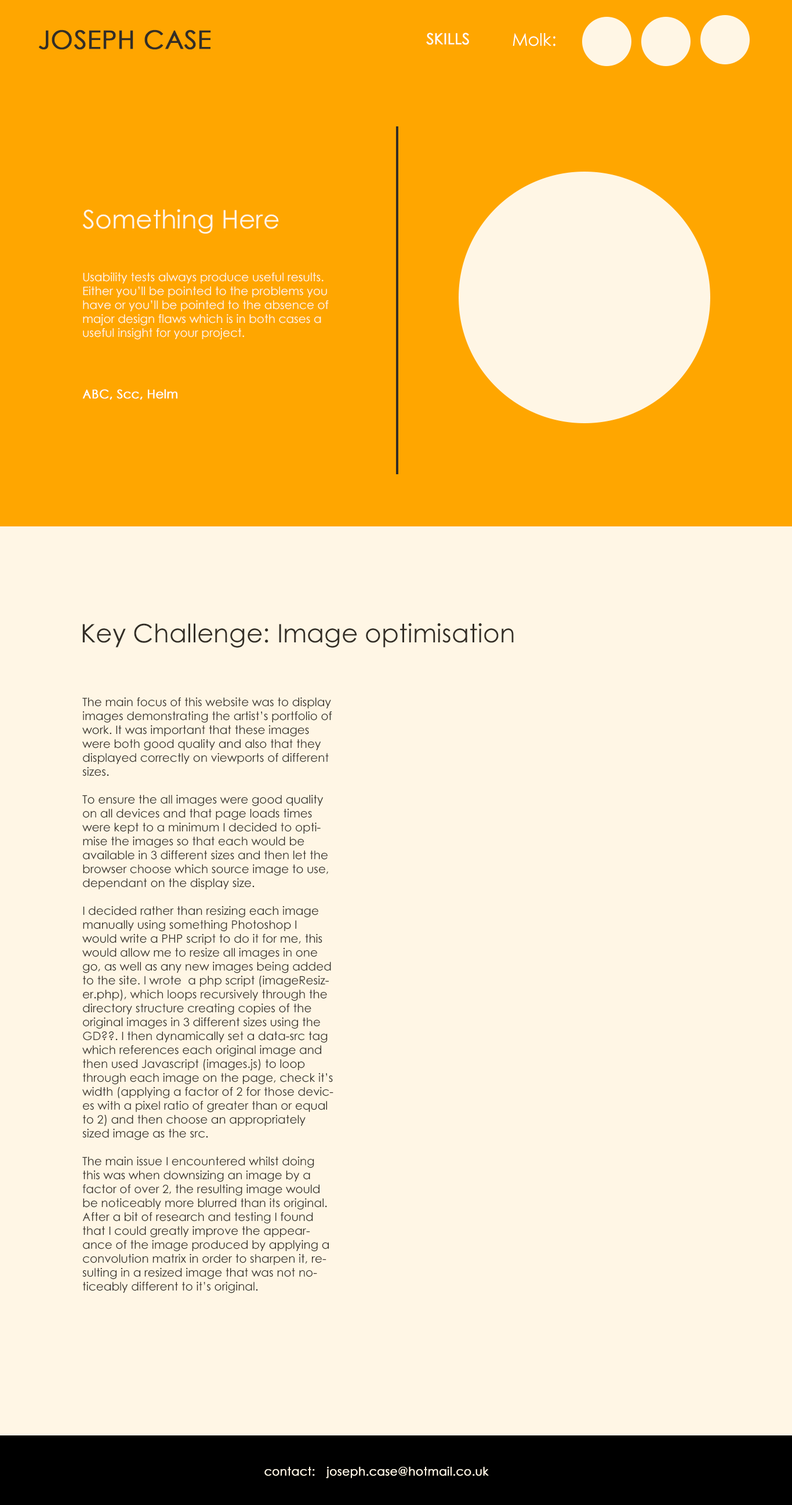
<style>
.page{position:relative;width:792px;height:1505px;background:#fff6e5}
.page>*{position:absolute;margin:0}
.t1{font:25.5px "CenturyGothic";color:#332e26;font-weight:bold}
.t2{font:15.1px "CenturyGothic";color:#ffffff;font-weight:bold}
.t3{font:17.4px "CenturyGothic";color:#ffffff}
.t4{font:25.5px "CenturyGothic";color:#fff6e5}
.t5{font:11.6px "CenturyGothic";color:#fff6e5}
.t6{font:12.2px "CenturyGothic";color:#ffffff;font-weight:bold}
.t7{font:25.5px "CenturyGothic";color:#332e26}
.t8{font:11.6px "CenturyGothic";color:#332e26}
.t9{font:11.6px "CenturyGothic";color:#fff6e5;font-weight:bold}
</style>
<div class="page">
<p class="t1" style="left:39px;top:30px;width:172px;height:20px">JOSEPH CASE</p>
<p class="t2" style="left:426px;top:32px;width:43px;height:13px">SKILLS</p>
<p class="t3" style="left:513px;top:33px;width:43px;height:13px">Molk:</p>
<p class="t4" style="left:82px;top:209px;width:197px;height:25px">Something Here</p>
<p class="t5" style="left:83px;top:273px;width:246px;height:67px">Usability tests always produce useful results. Either you’ll be pointed to the problems you have or you’ll be pointed to the absence of major design flaws which is in both cases a useful insight for your project.</p>
<p class="t6" style="left:82px;top:389px;width:95px;height:11px">ABC, Scc, Helm</p>
<p class="t7" style="left:82px;top:623px;width:432px;height:25px">Key Challenge: Image optimisation</p>
<p class="t8" style="left:82px;top:698px;width:251px;height:596px">The main focus of this website was to display images demonstrating the artist’s portfolio of work. It was important that these images were both good quality and also that they displayed correctly on viewports of different sizes.<br><br>To ensure the all images were good quality on all devices and that page loads times were kept to a minimum I decided to optimise the images so that each would be available in 3 different sizes and then let the browser choose which source image to use, dependant on the display size.<br><br>I decided rather than resizing each image manually using something Photoshop I would write a PHP script to do it for me, this would allow me to resize all images in one go, as well as any new images being added to the site. I wrote  a php script (imageResizer.php), which loops recursively through the directory structure creating copies of the original images in 3 different sizes using the GD??. I then dynamically set a data-src tag which references each original image and then used Javascript (images.js) to loop through each image on the page, check it’s width (applying a factor of 2 for those devices with a pixel ratio of greater than or equal to 2) and then choose an appropriately sized image as the src.<br><br>The main issue I encountered whilst doing this was when downsizing an image by a factor of over 2, the resulting image would be noticeably more blurred than its original. After a bit of research and testing I found that I could greatly improve the appearance of the image produced by applying a convolution matrix in order to sharpen it, resulting in a resized image that was not noticeably different to it’s original.</p>
<p class="t9" style="left:264px;top:1467px;width:225px;height:12px">contact: joseph.case@hotmail.co.uk</p>
</div>
